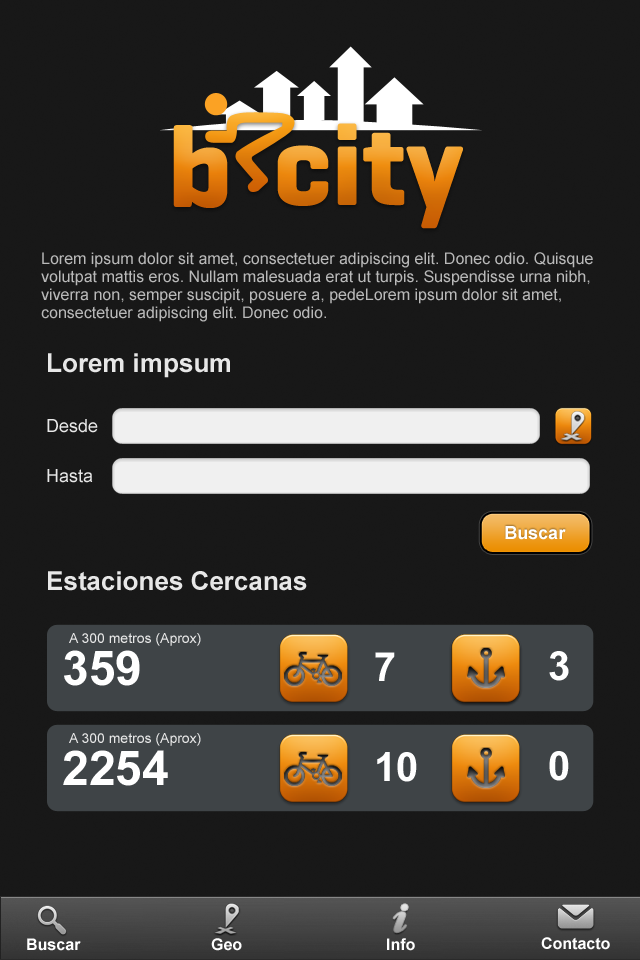
<style>
.page{position:relative;width:640px;height:960px;background:#181818}
.page>*{position:absolute;margin:0}
.t1{font:16px/18px "ArialMT";color:#b9b9b9}
.t2{font:26px "Arial-BoldMT";color:#e7e7e7}
.t3{font:18px "ArialMT";color:#e7e7e7}
.t4{font:18px "Arial-BoldMT";color:#ffffff}
.t5{font:14px "ArialMT";color:#e7e7e7}
.t6{font:48px "Arial-BoldMT";color:#ffffff}
.t7{font:40px "Arial-BoldMT";color:#ffffff}
.t8{font:16px "Arial-BoldMT";color:#ffffff}
</style>
<div class="page">
<p class="t1" style="left:41px;top:252px;width:552px;height:70px">Lorem ipsum dolor sit amet, consectetuer adipiscing elit. Donec odio. Quisque volutpat mattis eros. Nullam malesuada erat ut turpis. Suspendisse urna nibh, viverra non, semper suscipit, posuere a, pedeLorem ipsum dolor sit amet, consectetuer adipiscing elit. Donec odio.</p>
<p class="t2" style="left:48px;top:353px;width:182px;height:25px">Lorem impsum</p>
<p class="t3" style="left:47px;top:419px;width:51px;height:14px">Desde</p>
<p class="t3" style="left:47px;top:469px;width:46px;height:14px">Hasta</p>
<p class="t4" style="left:505px;top:526px;width:61px;height:14px">Buscar</p>
<p class="t2" style="left:48px;top:571px;width:259px;height:20px">Estaciones Cercanas</p>
<p class="t5" style="left:69px;top:633px;width:132px;height:13px">A 300 metros (Aprox)</p>
<p class="t6" style="left:64px;top:650px;width:76px;height:36px">359</p>
<p class="t7" style="left:375px;top:652px;width:20px;height:29px">7</p>
<p class="t7" style="left:549px;top:651px;width:20px;height:30px">3</p>
<p class="t5" style="left:69px;top:733px;width:132px;height:13px">A 300 metros (Aprox)</p>
<p class="t6" style="left:63px;top:750px;width:105px;height:36px">2254</p>
<p class="t7" style="left:377px;top:752px;width:40px;height:30px">10</p>
<p class="t7" style="left:549px;top:751px;width:20px;height:30px">0</p>
<p class="t8" style="left:27px;top:938px;width:54px;height:13px">Buscar</p>
<p class="t8" style="left:211px;top:938px;width:31px;height:13px">Geo</p>
<p class="t8" style="left:387px;top:938px;width:28px;height:13px">Info</p>
<p class="t8" style="left:541px;top:937px;width:69px;height:13px">Contacto</p>
</div>
